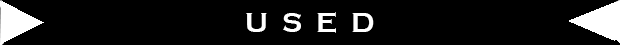
<style>
.page{position:relative;width:620px;height:45px;background:#000000}
.page>*{position:absolute;margin:0}
.t1{font:28px "CopperplateGothic-Bold";color:#ffffff}
</style>
<div class="page">
<p class="t1" style="left:246px;top:12px;width:128px;height:21px">U  S  E  D</p>
</div>
